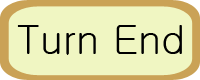
<style>
.page{position:relative;width:200px;height:80px;background:#f0f6c2}
.page>*{position:absolute;margin:0}
.t1{font:40px "Gulim";color:#000000}
</style>
<div class="page">
<p class="t1" style="left:17px;top:25px;width:165px;height:30px">Turn End</p>
</div>
